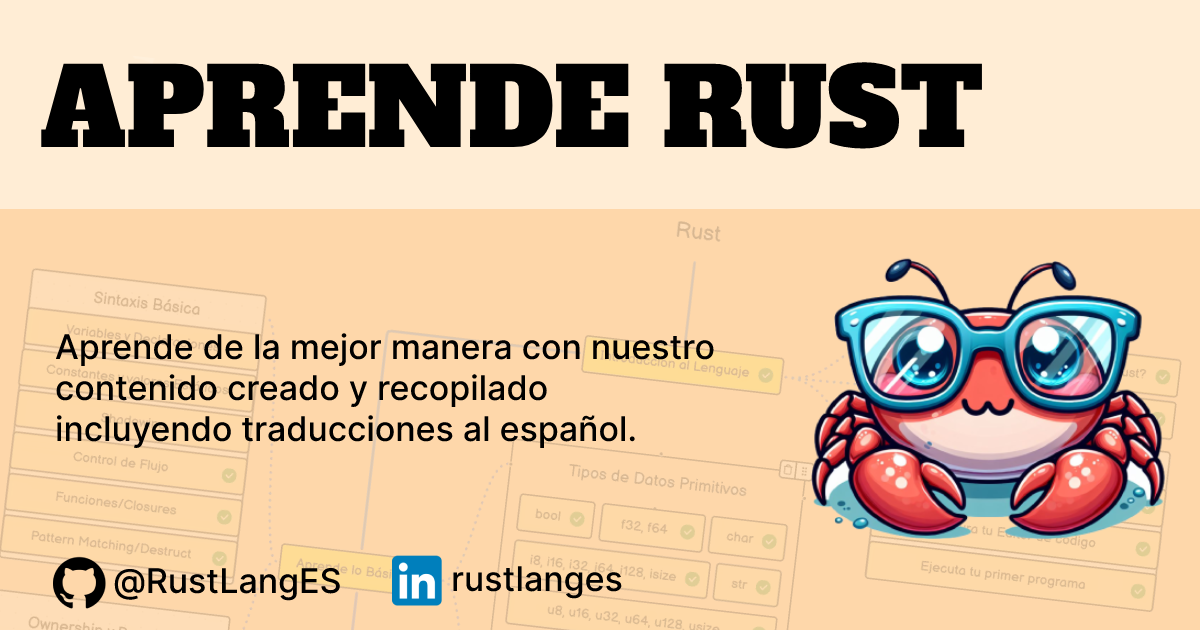
<style>
.page{position:relative;width:1200px;height:630px;background:#fed7aa}
.page>*{position:absolute;margin:0}
.t1{font:107px "AlfaSlabOne-Regular";color:#000000}
.t2{font:34px "Inter-Medium";color:#000000}
</style>
<div class="page">
<p class="t1" style="left:41px;top:62px;width:941px;height:87px">APRENDE RUST</p>
<p class="t2" style="left:55px;top:333px;width:659px;height:115px">Aprende de la mejor manera con nuestro<br>contenido creado y recopilado<br>incluyendo traducciones al español.</p>
<p class="t2" style="left:114px;top:567px;width:226px;height:34px">@RustLangES</p>
<p class="t2" style="left:453px;top:566px;width:169px;height:33px">rustlanges</p>
</div>
